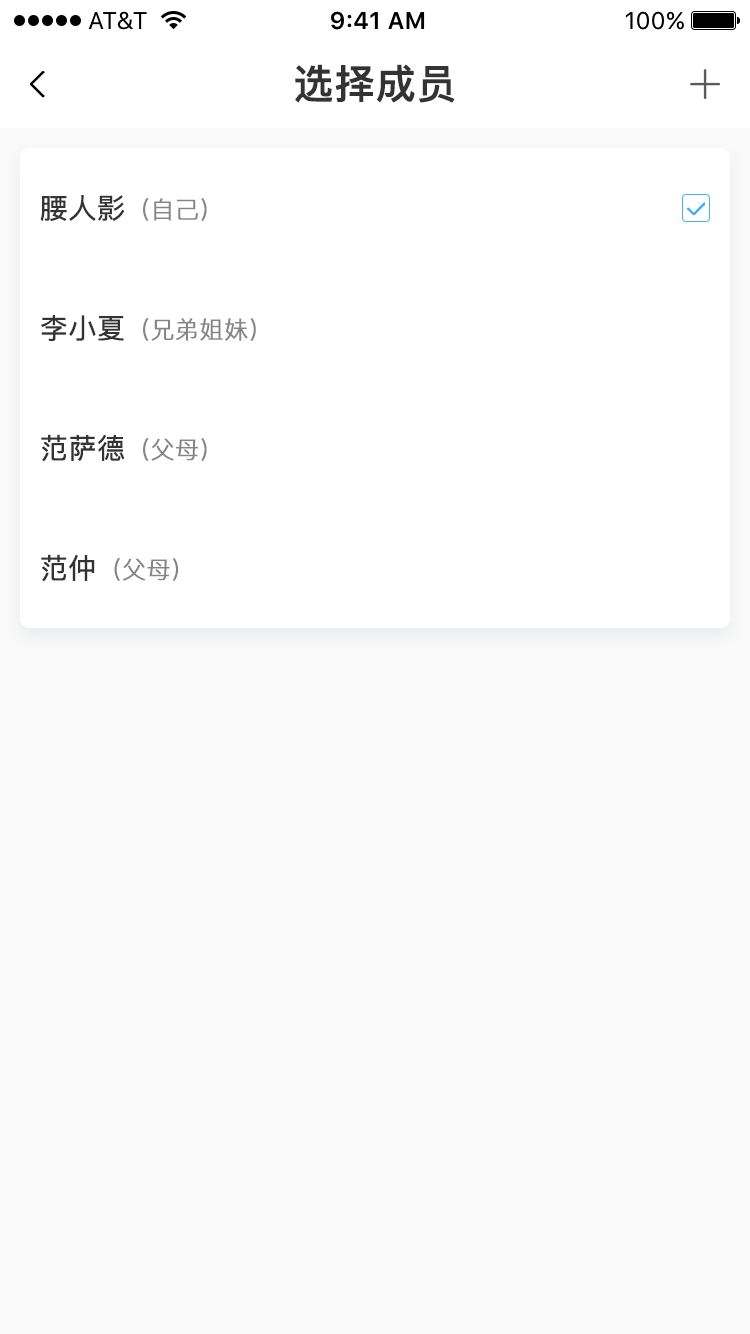
<style>
.page{position:relative;width:750px;height:1334px;background:#f9f9f9}
.page>*{position:absolute;margin:0}
.t1{font:40px "PingFangSC-Medium";color:#333333;font-weight:bold}
.t2{font:24px "PingFangSC-Light";color:#858585;font-weight:bold}
.t3{font:28px "PingFangSC-Regular";color:#333333;font-weight:bold}
</style>
<div class="page">
<p class="t1" style="left:295px;top:64px;width:160px;height:39px">选择成员</p>
<p class="t2" style="left:40px;top:195px;width:167px;height:26px"><span class="t3">腰人影</span>（自己）</p>
<p class="t2" style="left:41px;top:315px;width:215px;height:26px"><span class="t3">李小夏</span>（兄弟姐妹）</p>
<p class="t2" style="left:41px;top:434px;width:166px;height:28px"><span class="t3">范萨德</span>（父母）</p>
<p class="t2" style="left:41px;top:554px;width:137px;height:28px"><span class="t3">范仲</span>（父母）</p>
</div>
